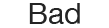
<style>
.page{position:relative;width:109px;height:28px;background:#ffffff}
.page>*{position:absolute;margin:0}
.t1{font:30px "HelveticaNeue";color:#242424}
</style>
<div class="page">
<p class="t1" style="left:29px;top:3px;width:51px;height:21px">Bad</p>
</div>
